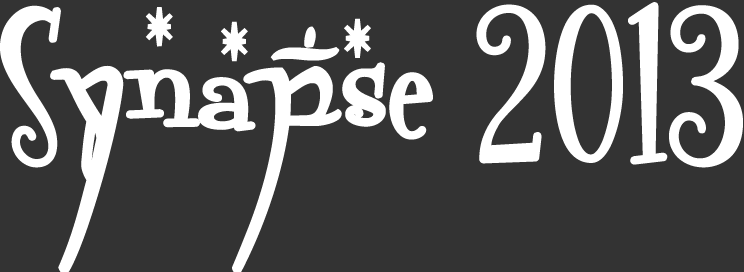
<style>
.page{position:relative;width:744px;height:272px;background:#333333}
.page>*{position:absolute;margin:0}
.t1{font:166.7px "FontdinerdotcomSparkly";letter-spacing:-0.01em;color:#ffffff;font-weight:bold}
.t2{font:166.7px "FontdinerdotcomSparkly";letter-spacing:-0.05em;color:#ffffff;font-weight:bold}
.t3{font:166.7px "ElvishRingNFI";letter-spacing:0.05em;color:#ffffff;font-weight:bold}
.t4{font:166.7px "FontdinerdotcomSparkly";letter-spacing:0.01em;color:#ffffff;font-weight:bold}
.t5{font:166.7px "ElvishRingNFI";letter-spacing:-0.01em;color:#ffffff;font-weight:bold}
</style>
<div class="page">
<p class="t1" style="left:0px;top:2px;width:743px;height:272px"><span class="t2">S</span><span class="t3">y</span><span class="t4">n</span><span class="t2">a</span><span class="t5">p</span>se 2013</p>
</div>
